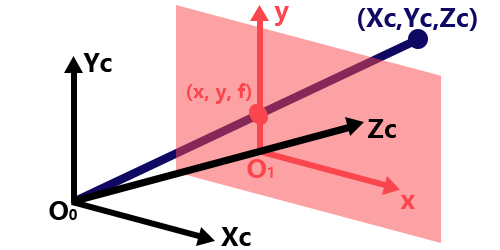
<style>
.page{position:relative;width:500px;height:250px;background:#ffffff}
.page>*{position:absolute;margin:0}
.t1{font:25px "MicrosoftYaHei-Bold";color:#fa464c}
.t2{font:25px "MicrosoftYaHei-Bold";color:#100964}
.t3{font:25px "MicrosoftYaHei-Bold";color:#000000}
.t4{font:19.2px "MicrosoftYaHei-Bold";color:#fa464c}
.t5{font:13.9px "MicrosoftYaHei-Bold";color:#fa464c}
.t6{font:13.9px "MicrosoftYaHei-Bold";color:#000000}
</style>
<div class="page">
<p class="t1" style="left:274px;top:6px;width:15px;height:20px">y</p>
<p class="t2" style="left:358px;top:8px;width:119px;height:23px">(Xc,Yc,Zc)</p>
<p class="t3" style="left:83px;top:53px;width:29px;height:19px">Yc</p>
<p class="t4" style="left:187px;top:83px;width:65px;height:21px">(x, y, f)</p>
<p class="t3" style="left:368px;top:119px;width:28px;height:19px">Zc</p>
<p class="t1" style="left:247px;top:159px;width:19px;height:19px">O</p>
<p class="t5" style="left:268px;top:167px;width:5px;height:11px">1</p>
<p class="t1" style="left:400px;top:195px;width:15px;height:14px">x</p>
<p class="t3" style="left:49px;top:201px;width:19px;height:19px">O</p>
<p class="t6" style="left:69px;top:209px;width:8px;height:11px">0</p>
<p class="t3" style="left:221px;top:227px;width:30px;height:19px">Xc</p>
</div>
